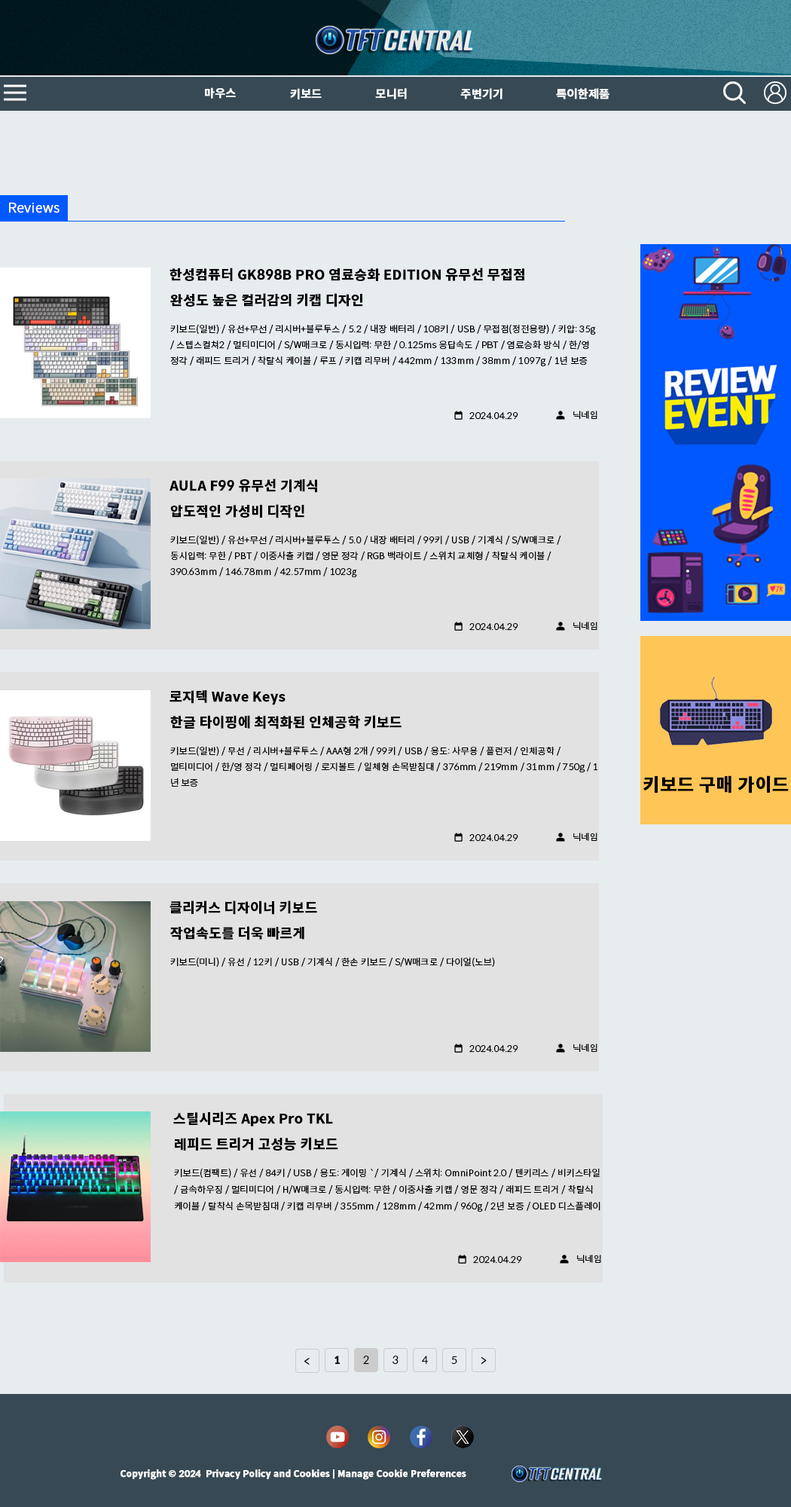
<style>
.page{position:relative;width:791px;height:1507px;background:#e7ecef}
.page>*{position:absolute;margin:0}
.t1{font:11.3px "SpoqaHanSansNeo-Bold";color:#ffffff;font-weight:bold}
.t2{font:13.6px "SpoqaHanSansNeo-Light";color:#ffffff;font-weight:bold}
.t3{font:13.6px "SpoqaHanSansNeo-Bold";color:#000000;font-weight:bold}
.t4{font:9px "SpoqaHanSansNeo-Light";color:#000000;font-weight:bold}
.t5{font:9px/16.6px "SpoqaHanSansNeo-Light";color:#000000;font-weight:bold}
.t6{font:12.1px "SpoqaHanSansNeo-Light";color:#000000;font-weight:bold}
.t7{font:10.5px "SpoqaHanSansNeo-Bold";color:#000000;font-weight:bold}
.t8{font:10.5px "SpoqaHanSansNeo-Light";color:#000000;font-weight:bold}
.t9{font:9px "SpoqaHanSansNeo-Bold";color:#ffffff;font-weight:bold}
</style>
<div class="page">
<p class="t1" style="left:205px;top:87px;width:31px;height:12px">마우스</p>
<p class="t1" style="left:290px;top:88px;width:32px;height:11px">키보드</p>
<p class="t1" style="left:375px;top:88px;width:32px;height:11px">모니터</p>
<p class="t1" style="left:460px;top:88px;width:43px;height:11px">주변기기</p>
<p class="t1" style="left:556px;top:88px;width:54px;height:11px">특이한제품</p>
<p class="t2" style="left:9px;top:202px;width:51px;height:11px">Reviews</p>
<p class="t3" style="left:170px;top:268px;width:354px;height:13px">한성컴퓨터 GK898B PRO 염료승화 EDITION 유무선 무접점</p>
<p class="t3" style="left:170px;top:293px;width:193px;height:14px">완성도 높은 컬러감의 키캡 디자인</p>
<p class="t4" style="left:170px;top:324px;width:426px;height:43px">키보드(일반) / 유선+무선 / 리시버+블루투스 / 5.2 / 내장 배터리 / 108키 / USB / 무접점(정전용량) / 키압: 35g / 스텝스컬쳐2 / 멀티미디어 / S/W매크로 / 동시입력: 무한 / 0.125ms 응답속도 / PBT / 염료승화 방식 / 한/영 정각 / 래피드 트리거 / 착탈식 케이블 / 루프 / 키캡 리무버 / 442mm / 133mm / 38mm / 1097g / 1년 보증</p>
<p class="t4" style="left:469px;top:412px;width:49px;height:8px">2024.04.29</p>
<p class="t4" style="left:573px;top:411px;width:25px;height:9px">닉네임</p>
<p class="t3" style="left:170px;top:478px;width:147px;height:15px">AULA F99 유무선 기계식</p>
<p class="t3" style="left:170px;top:504px;width:134px;height:14px">압도적인 가성비 디작인</p>
<p class="t4" style="left:170px;top:535px;width:391px;height:43px">키보드(일반) / 유선+무선 / 리시버+블루투스 / 5.0 / 내장 배터리 / 99키 / USB / 기계식 / S/W매크로 / 동시입력: 무한 / PBT / 이중사출 키캡 / 영문 정각 / RGB 백라이트 / 스위치 교체형 / 착탈식 케이블 / 390.63mm / 146.78mm / 42.57mm / 1023g</p>
<p class="t4" style="left:469px;top:623px;width:49px;height:8px">2024.04.29</p>
<p class="t4" style="left:573px;top:622px;width:25px;height:9px">닉네임</p>
<p class="t3" style="left:170px;top:690px;width:116px;height:15px">로지텍 Wave Keys</p>
<p class="t3" style="left:170px;top:715px;width:232px;height:14px">한글 타이핑에 최적화된 인체공학 키보드</p>
<p class="t4" style="left:170px;top:746px;width:428px;height:41px">키보드(일반) / 무선 / 리시버+블루투스 / AAA형 2개 / 99키 / USB / 용도: 사무용 / 플런저 / 인체공학 / 멀티미디어 / 한/영 정각 / 멀티페어링 / 로지볼트 / 일체형 손목받침대 / 376mm / 219mm / 31mm / 750g / 1년 보증</p>
<p class="t4" style="left:573px;top:833px;width:25px;height:9px">닉네임</p>
<p class="t4" style="left:469px;top:834px;width:49px;height:8px">2024.04.29</p>
<p class="t3" style="left:170px;top:900px;width:147px;height:15px">클리커스 디자이너 키보드</p>
<p class="t3" style="left:170px;top:926px;width:134px;height:14px">작업속도를 더욱 빠르게</p>
<p class="t4" style="left:170px;top:957px;width:325px;height:11px">키보드(미니) / 유선 / 12키 / USB / 기계식 / 한손 키보드 / S/W매크로 / 다이얼(노브)</p>
<p class="t4" style="left:469px;top:1045px;width:49px;height:8px">2024.04.29</p>
<p class="t4" style="left:573px;top:1044px;width:25px;height:9px">닉네임</p>
<p class="t3" style="left:173px;top:1111px;width:160px;height:16px">스틸시리즈 Apex Pro TKL</p>
<p class="t3" style="left:175px;top:1137px;width:163px;height:14px">레피드 트리거 고성능 키보드</p>
<p class="t5" style="left:174px;top:1168px;width:427px;height:44px">키보드(컴팩트) / 유선 / 84키 / USB / 용도: 게이밍 `/ 기계식 / 스위치: OmniPoint 2.0 / 텐키리스 / 비키스타일 / 금속하우징 / 멀티미디어 / H/W매크로 / 동시입력: 무한 / 이중사출 키캡 / 영문 정각 / 래피드 트리거 / 착탈식 케이블 / 탈착식 손목받침대 / 키캡 리무버 / 355mm / 128mm / 42mm / 960g / 2년 보증 / OLED 디스플레이</p>
<p class="t4" style="left:473px;top:1256px;width:49px;height:8px">2024.04.29</p>
<p class="t4" style="left:577px;top:1255px;width:24px;height:9px">닉네임</p>
<p class="t6" style="left:304px;top:1358px;width:6px;height:7px">&lt;</p>
<p class="t7" style="left:335px;top:1356px;width:6px;height:9px">1</p>
<p class="t8" style="left:363px;top:1356px;width:6px;height:9px">2</p>
<p class="t8" style="left:393px;top:1356px;width:6px;height:9px">3</p>
<p class="t8" style="left:422px;top:1356px;width:7px;height:9px">4</p>
<p class="t8" style="left:451px;top:1356px;width:6px;height:9px">5</p>
<p class="t6" style="left:482px;top:1357px;width:5px;height:8px">&gt;</p>
<p class="t9" style="left:121px;top:1469px;width:345px;height:11px">Copyright © 2024  Privacy Policy and Cookies | Manage Cookie Preferences</p>
</div>
